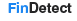
<style>
.page{position:relative;width:77px;height:21px;background:#ffffff}
.page>*{position:absolute;margin:0}
.t1{font:13.9px "Helvetica-Bold";color:#252526}
.t2{font:13.9px "Helvetica-Bold";color:#1c87f2}
</style>
<div class="page">
<p class="t1" style="left:8px;top:2px;width:64px;height:11px"><span class="t2">Fin</span>Detect</p>
</div>
